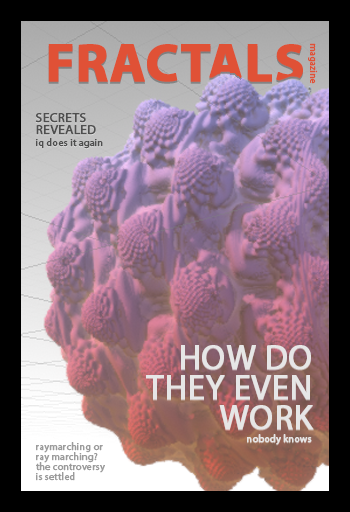
<style>
.page{position:relative;width:350px;height:512px;background:#000000}
.page>*{position:absolute;margin:0}
.t1{font:54.6px "MyriadPro-Bold";color:#e05136;font-weight:bold}
.t2{font:9.5px "MyriadPro-Regular";color:#e05136;font-weight:bold}
.t3{font:13.4px/11.6px "MyriadPro-Regular";color:#4f4f4f;font-weight:bold}
.t4{font:10px/11.6px "MyriadPro-Regular";color:#4f4f4f;font-weight:bold}
.t5{font:34.4px/30px "MyriadPro-Regular";color:#e6e6e6;font-weight:bold}
.t6{font:10px "MyriadPro-Regular";color:#e6e6e6;font-weight:bold}
.t7{font:10px/10px "MyriadPro-Regular";color:#9b9b9b;font-weight:bold}
</style>
<div class="page">
<p class="t1" style="left:48px;top:44px;width:255px;height:38px">FRACTALS</p>
<p class="t2" style="left:308px;top:43px;width:10px;height:41px;rotate:90deg">magazine</p>
<p class="t3" style="left:35px;top:113px;width:68px;height:36px">SECRETS<br>REVEALED<br><span class="t4">iq does it again</span></p>
<p class="t5" style="left:146px;top:345px;width:168px;height:85px;text-align:right">HOW DO<br>THEY EVEN<br>WORK</p>
<p class="t6" style="left:247px;top:434px;width:65px;height:11px">nobody knows</p>
<p class="t7" style="left:36px;top:442px;width:69px;height:39px">raymarching or<br>ray marching?<br>the controversy<br>is settled</p>
</div>
